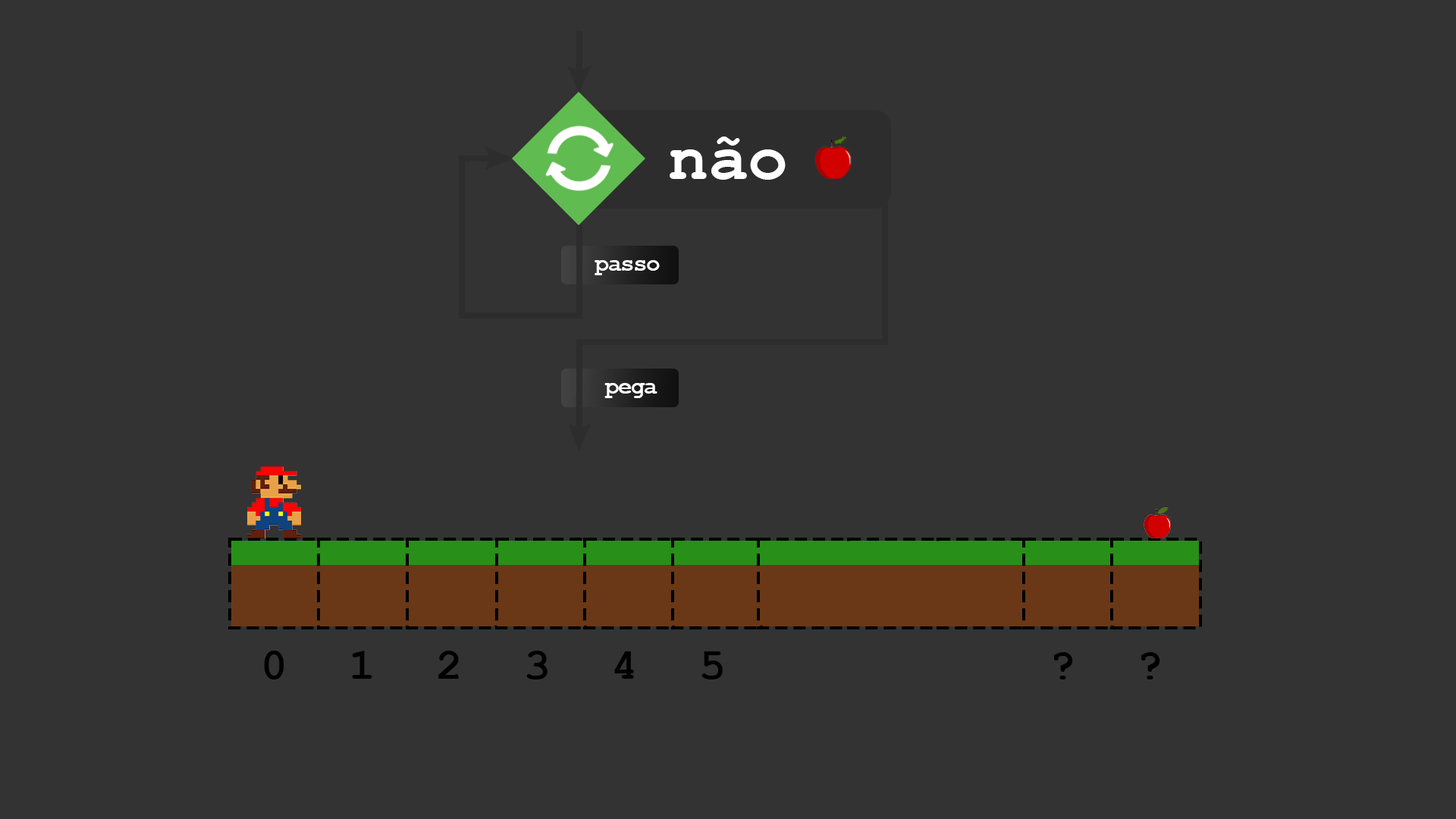
<style>
.page{position:relative;width:1456px;height:819px;background:#333333}
.page>*{position:absolute;margin:0}
.t1{font:66.6px "CourierNewPS-BoldMT";color:#ffffff}
.t2{font:23.8px "CourierNewPS-BoldMT";letter-spacing:-0.06em;color:#ffffff}
.t3{font:44.2px "CourierNewPS-BoldMT";letter-spacing:1.38em;color:#000000}
</style>
<div class="page">
<p class="t1" style="left:670px;top:136px;width:116px;height:44px">não</p>
<p class="t2" style="left:595px;top:260px;width:65px;height:15px">passo</p>
<p class="t2" style="left:604px;top:383px;width:53px;height:15px">pega</p>
<p class="t3" style="left:264px;top:651px;width:896px;height:28px">012345   ??</p>
</div>
